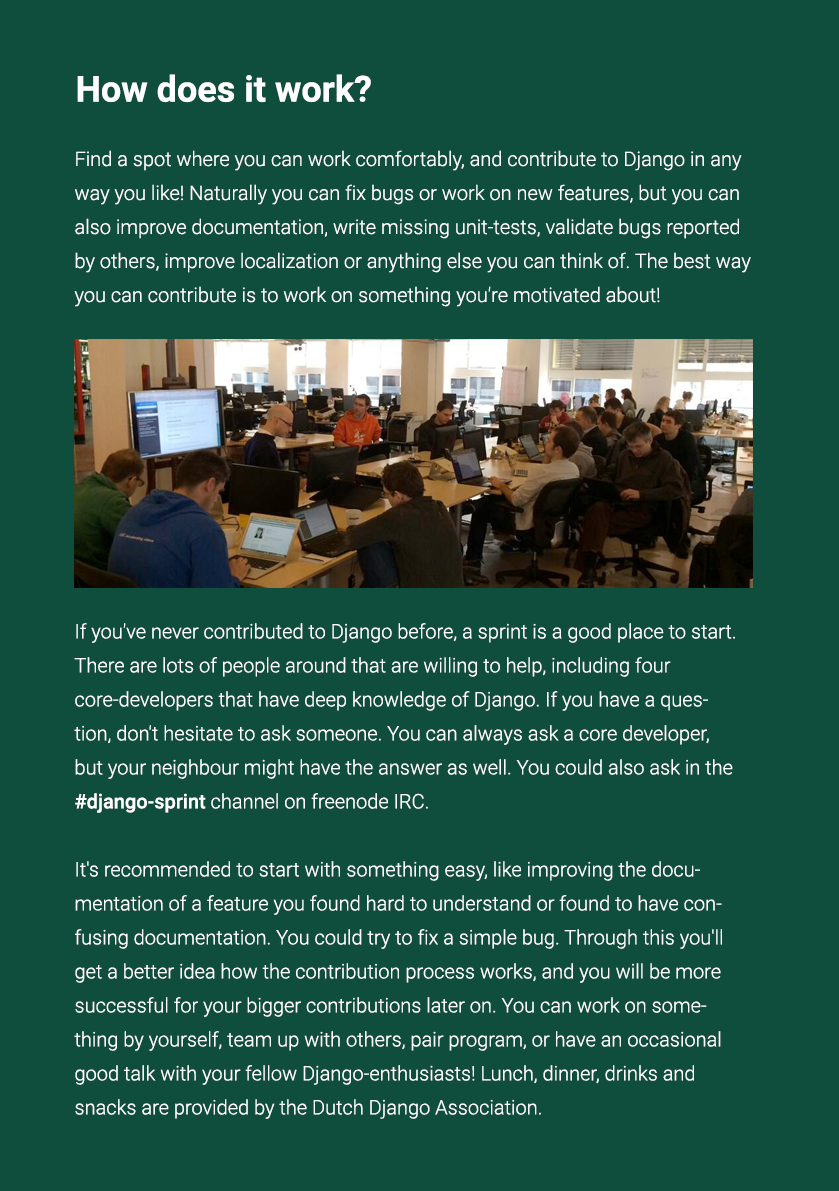
<style>
.page{position:relative;width:839px;height:1191px;background:#0f4e3c}
.page>*{position:absolute;margin:0}
.t1{font:36px "Roboto-Bold";color:#ffffff}
.t2{font:20px/34px "Roboto-Light";color:#ffffff}
.t3{font:20px/34px "Roboto-Medium";color:#ffffff}
</style>
<div class="page">
<p class="t1" style="left:77px;top:74px;width:294px;height:29px">How does it work?</p>
<p class="t2" style="left:74px;top:150px;width:677px;height:157px">Find a spot where you can work comfortably, and contribute to Django in any way you like! Naturally you can fix bugs or work on new features, but you can also improve documentation, write missing unit-tests, validate bugs reported by others, improve localization or anything else you can think of. The best way you can contribute is to work on something you're motivated about!</p>
<p class="t2" style="left:74px;top:623px;width:661px;height:496px">If you've never contributed to Django before, a sprint is a good place to start. There are lots of people around that are willing to help, including four core-developers that have deep knowledge of Django. If you have a question, don't hesitate to ask someone. You can always ask a core developer, but your neighbour might have the answer as well. You could also ask in the <span class="t3">#django-sprint</span> channel on freenode IRC.<br><br>It's recommended to start with something easy, like improving the documentation of a feature you found hard to understand or found to have confusing documentation. You could try to fix a simple bug. Through this you'll get a better idea how the contribution process works, and you will be more successful for your bigger contributions later on. You can work on something by yourself, team up with others, pair program, or have an occasional good talk with your fellow Django-enthusiasts! Lunch, dinner, drinks and snacks are provided by the Dutch Django Association.</p>
</div>
